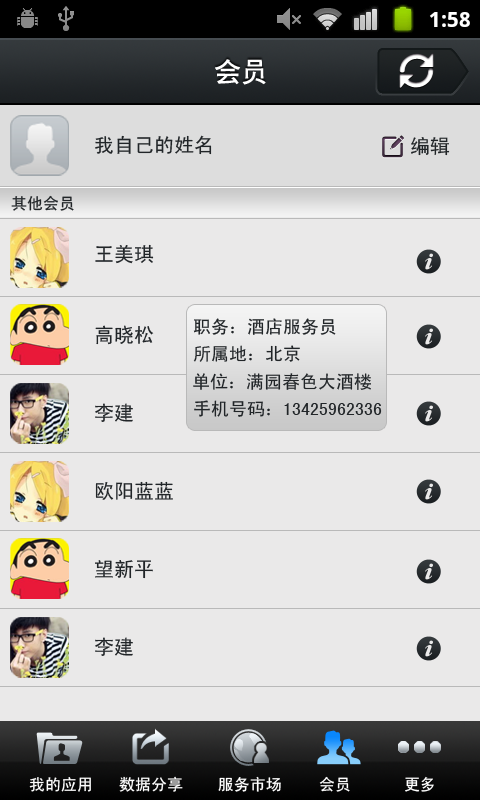
<style>
.page{position:relative;width:480px;height:800px;background:#eae9e9}
.page>*{position:absolute;margin:0}
.t1{font:27px "CTCuHeiSJ";color:#ffffff}
.t2{font:20px "SimHei";color:#212528}
.t3{font:16px "SimHei";color:#212528}
.t4{font:18px "SimHei";color:#212528}
.t5{font:16px "SimHei";color:#ffffff}
</style>
<div class="page">
<p class="t1" style="left:215px;top:59px;width:51px;height:26px">会员</p>
<p class="t2" style="left:95px;top:135px;width:117px;height:20px">我自己的姓名</p>
<p class="t2" style="left:411px;top:137px;width:39px;height:19px">编辑</p>
<p class="t3" style="left:11px;top:195px;width:63px;height:16px">其他会员</p>
<p class="t2" style="left:95px;top:244px;width:59px;height:20px">王美琪</p>
<p class="t4" style="left:193px;top:318px;width:143px;height:17px">职务：酒店服务员</p>
<p class="t2" style="left:95px;top:325px;width:59px;height:20px">高晓松</p>
<p class="t4" style="left:193px;top:345px;width:107px;height:17px">所属地：北京</p>
<p class="t4" style="left:193px;top:373px;width:178px;height:17px">单位：满园春色大酒楼</p>
<p class="t4" style="left:194px;top:400px;width:188px;height:17px">手机号码：13425962336</p>
<p class="t2" style="left:95px;top:403px;width:38px;height:19px">李建</p>
<p class="t2" style="left:95px;top:481px;width:78px;height:19px">欧阳蓝蓝</p>
<p class="t2" style="left:95px;top:560px;width:58px;height:19px">望新平</p>
<p class="t2" style="left:95px;top:637px;width:38px;height:19px">李建</p>
<p class="t5" style="left:29px;top:777px;width:62px;height:15px">我的应用</p>
<p class="t5" style="left:119px;top:776px;width:64px;height:16px">数据分享</p>
<p class="t5" style="left:218px;top:776px;width:63px;height:16px">服务市场</p>
<p class="t5" style="left:319px;top:776px;width:31px;height:16px">会员</p>
<p class="t5" style="left:405px;top:776px;width:29px;height:16px">更多</p>
</div>
